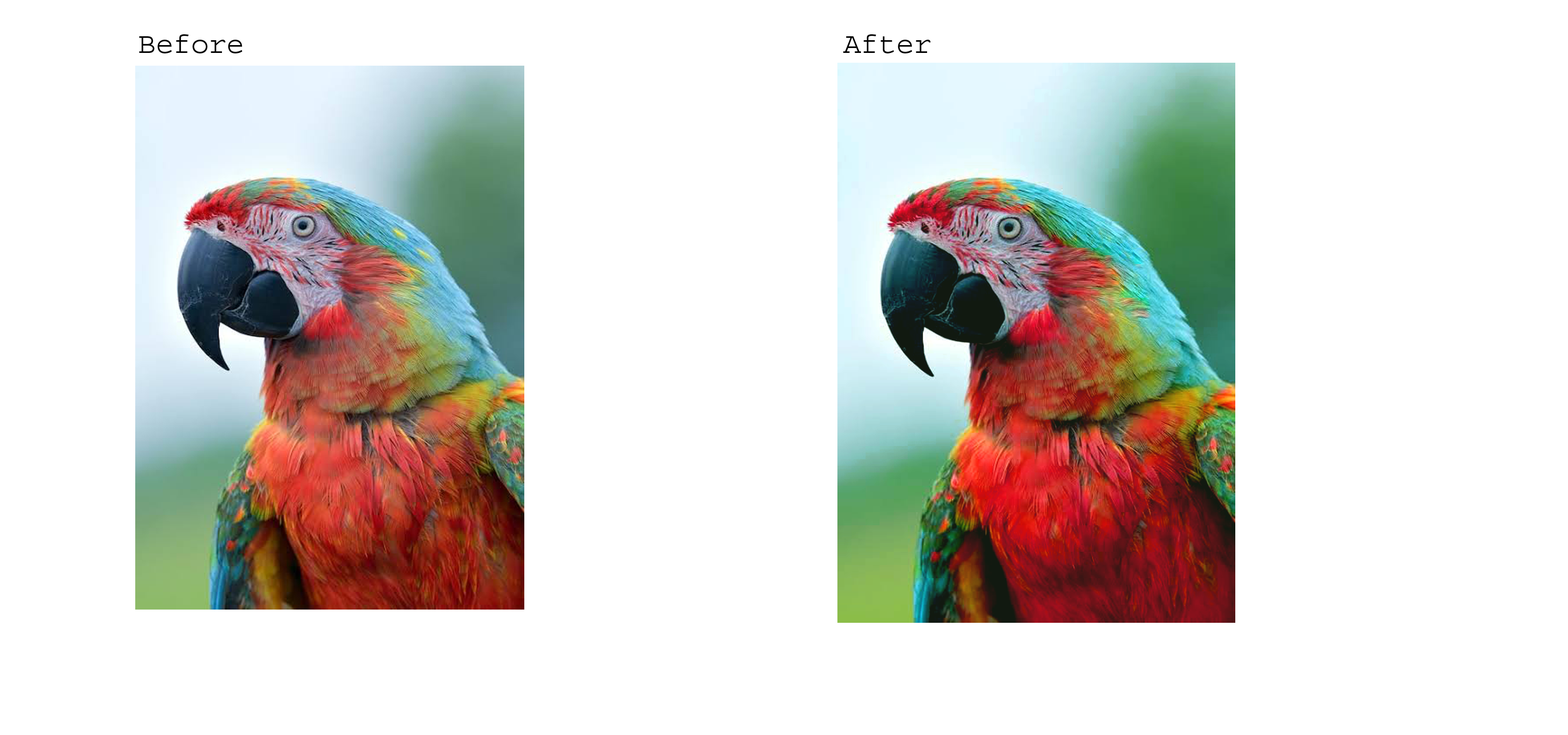
<style>
.page{position:relative;width:1568px;height:735px;background:#ffffff}
.page>*{position:absolute;margin:0}
.t1{font:29.4px "Courier";color:#010101}
</style>
<div class="page">
<p class="t1" style="left:139px;top:34px;width:104px;height:19px">Before</p>
<p class="t1" style="left:843px;top:34px;width:88px;height:19px">After</p>
</div>
